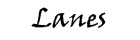
<style>
.page{position:relative;width:140px;height:40px;background:#ffffff}
.page>*{position:absolute;margin:0}
.t1{font:26.7px "VinerHandITC";color:#000000}
</style>
<div class="page">
<p class="t1" style="left:31px;top:7px;width:75px;height:21px">Lanes</p>
</div>
